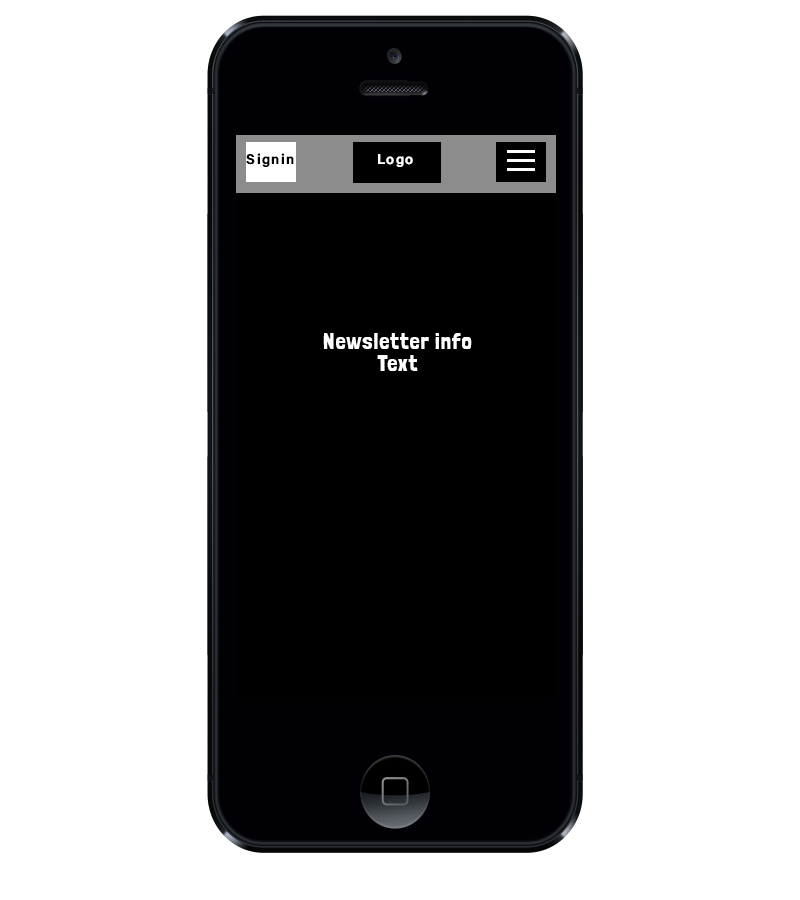
<style>
.page{position:relative;width:800px;height:900px;background:#ffffff}
.page>*{position:absolute;margin:0}
.t1{font:14px "AcuminConcept-Semibold";letter-spacing:0.1em;color:#000000}
.t2{font:14px "AcuminConcept-Semibold";letter-spacing:0.1em;color:#ffffff}
.t3{font:22.8px/21.9px "LondrinaSolid-Regular";letter-spacing:0.04em;color:#ffffff}
</style>
<div class="page">
<p class="t1" style="left:246px;top:153px;width:48px;height:14px">Signin</p>
<p class="t2" style="left:378px;top:154px;width:35px;height:13px">Logo</p>
<p class="t3" style="left:323px;top:333px;width:149px;height:38px;text-align:center">Newsletter info<br>Text</p>
</div>
